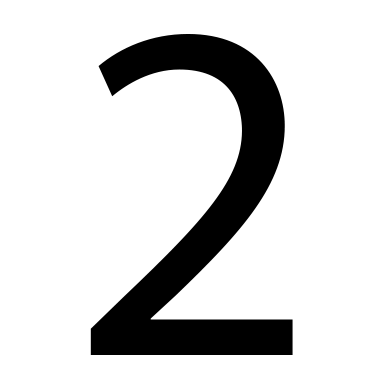
<style>
.page{position:relative;width:384px;height:384px;background:#ffffff}
.page>*{position:absolute;margin:0}
.t1{font:486.1px "MyriadPro-Regular";color:#000000}
</style>
<div class="page">
<p class="t1" style="left:90px;top:34px;width:203px;height:321px">2</p>
</div>
